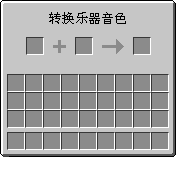
<style>
.page{position:relative;width:176px;height:176px;background:#c6c6c6}
.page>*{position:absolute;margin:0}
.t1{font:11.7px "mplus_hzk_12";color:#000000}
</style>
<div class="page">
<p class="t1" style="left:49px;top:12px;width:77px;height:12px">转换乐器音色</p>
</div>
